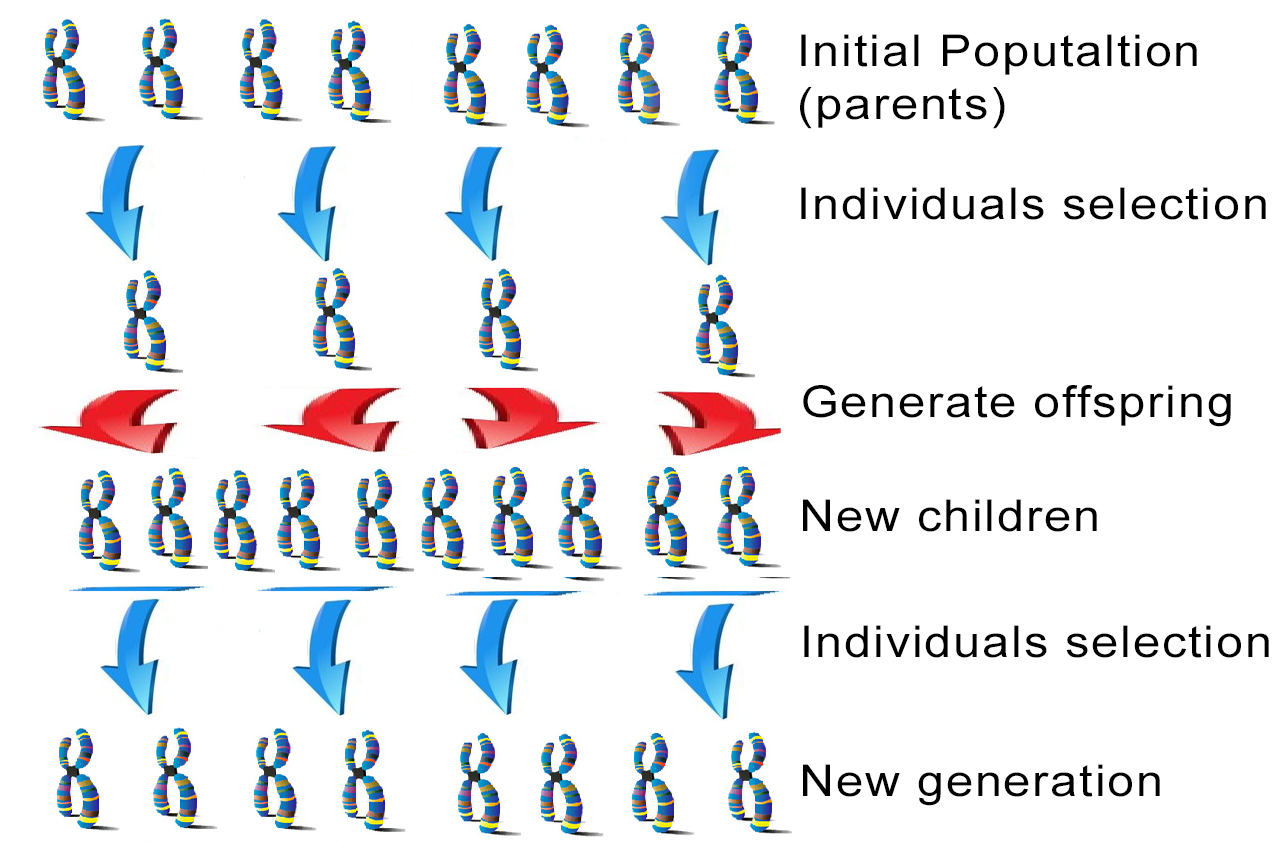
<style>
.page{position:relative;width:1283px;height:861px;background:#ffffff}
.page>*{position:absolute;margin:0}
.t1{font:44px "ArialMT";letter-spacing:0.04em;color:#000000;scale:1.1 1}
</style>
<div class="page">
<p class="t1" style="left:800px;top:34px;width:397px;height:95px">Initial Poputaltion    (parents)</p>
<p class="t1" style="left:801px;top:187px;width:465px;height:33px">Individuals selection</p>
<p class="t1" style="left:803px;top:385px;width:428px;height:42px">Generate offspring</p>
<p class="t1" style="left:803px;top:499px;width:294px;height:33px">New children</p>
<p class="t1" style="left:804px;top:625px;width:465px;height:33px">Individuals selection</p>
<p class="t1" style="left:803px;top:764px;width:357px;height:42px">New generation</p>
</div>
